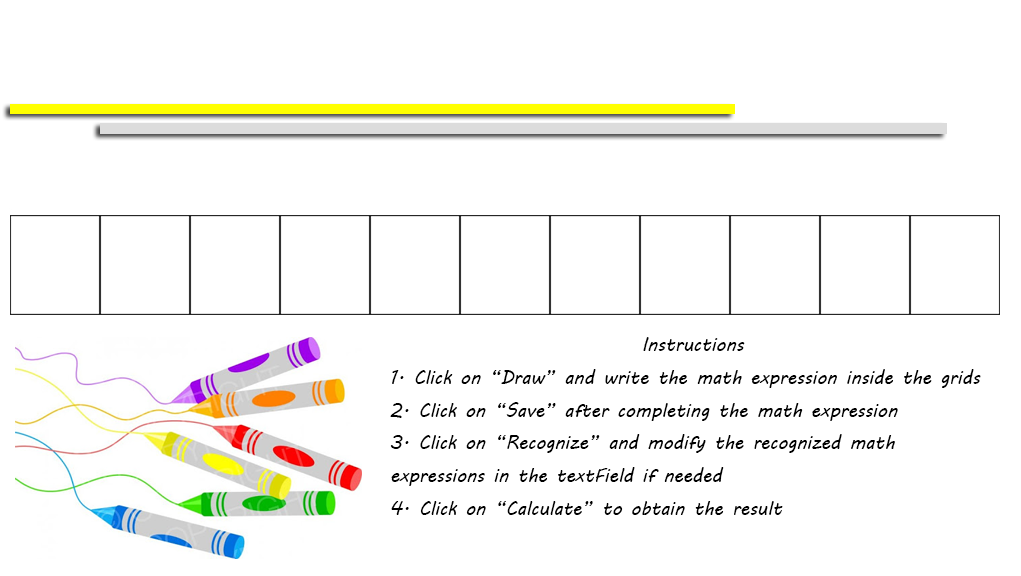
<style>
.page{position:relative;width:1021px;height:576px;background:#ffffff}
.page>*{position:absolute;margin:0}
.t1{font:18.7px "MVBoli";color:#000000}
</style>
<div class="page">
<p class="t1" style="left:390px;top:337px;width:591px;height:178px;text-align:center">Instructions<br>1. Click on “Draw” and write the math expression inside the grids<br>2. Click on “Save” after completing the math expression<br>3. Click on “Recognize” and modify the recognized math expressions in the textField if needed<br>4. Click on “Calculate” to obtain the result</p>
</div>
